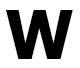
<style>
.page{position:relative;width:80px;height:68px;background:#ffffff}
.page>*{position:absolute;margin:0}
.t1{font:66.7px "Tahoma-Bold";color:#000000}
</style>
<div class="page">
<p class="t1" style="left:6px;top:10px;width:67px;height:49px">W</p>
</div>
